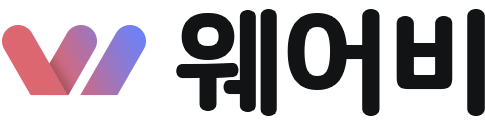
<style>
.page{position:relative;width:485px;height:128px;background:#ffffff}
.page>*{position:absolute;margin:0}
.t1{font:120px "NanumSquareRoundEB";letter-spacing:-0.02em;color:#111314}
</style>
<div class="page">
<p class="t1" style="left:177px;top:10px;width:307px;height:105px">웨어비</p>
</div>
